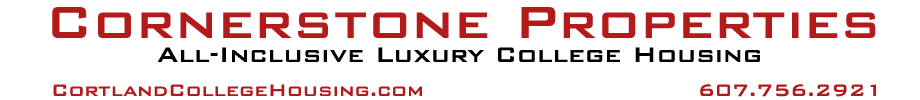
<style>
.page{position:relative;width:920px;height:100px;background:#ffffff}
.page>*{position:absolute;margin:0}
.t1{font:60px "BankGothicBold";color:#b31b1b}
.t2{font:28px "BankGothicBold";color:#000000}
.t3{font:22px "BankGothicBold";color:#b31b1b}
</style>
<div class="page">
<p class="t1" style="left:52px;top:7px;width:824px;height:31px">Cornerstone Properties</p>
<p class="t2" style="left:157px;top:47px;width:603px;height:15px">All-Inclusive Luxury College Housing</p>
<p class="t3" style="left:53px;top:84px;width:369px;height:12px">CortlandCollegeHousing.com</p>
<p class="t3" style="left:700px;top:84px;width:176px;height:13px">607.756.2921</p>
</div>
